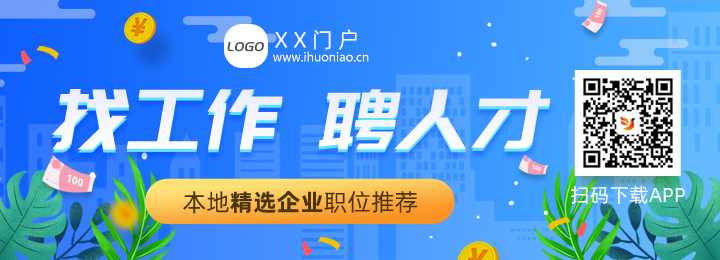
<style>
.page{position:relative;width:720px;height:260px}
.page>*{position:absolute;margin:0}
.t1{font:22px "AlibabaPuHuiTi-Regular";letter-spacing:0.24em;color:#ffffff}
.t2{font:14px "PangMenZhengDao";color:#555555;text-transform:uppercase;font-style:italic}
.t3{font:12px "MicrosoftYaHei";color:#ffffff}
.t4{font:83px "PangMenZhengDao";color:#ffffff;font-style:italic}
.t5{font:83px "PangMenZhengDao";color:#f2f3fe;font-style:italic}
.t6{font:20px "AlibabaPuHuiTiR";color:#ffffff}
.t7{font:24px "AlibabaPuHuiTiB";color:#4b3508}
.t8{font:24px "AlibabaPuHuiTiR";color:#4b3508}
</style>
<div class="page">
<p class="t1" style="left:275px;top:29px;width:82px;height:21px">XX门户</p>
<p class="t2" style="left:227px;top:42px;width:37px;height:10px">logo</p>
<p class="t3" style="left:273px;top:51px;width:96px;height:11px">www.ihuoniao.cn</p>
<p class="t4" style="left:51px;top:89px;width:500px;height:61px">找工作 聘人才</p>
<p class="t5" style="left:51px;top:92px;width:500px;height:61px">找工作 聘人才</p>
<p class="t6" style="left:570px;top:185px;width:115px;height:19px">扫码下载APP</p>
<p class="t7" style="left:183px;top:191px;width:234px;height:23px"><span class="t8">本地</span>精选企业<span class="t8">职位推荐</span></p>
</div>
